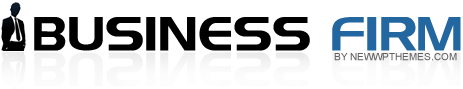
<style>
.page{position:relative;width:463px;height:89px;background:#ffffff}
.page>*{position:absolute;margin:0}
.t1{font:48px "Denmark";color:#000000;text-transform:uppercase}
.t2{font:48px "Denmark";color:#2267a0;text-transform:uppercase}
.t3{font:10px "ArialMT";color:#646161;text-transform:uppercase}
</style>
<div class="page">
<p class="t1" style="left:34px;top:17px;width:427px;height:34px">Business <span class="t2">Firm</span></p>
<p class="t3" style="left:334px;top:53px;width:123px;height:8px">by NewWpThemes.com</p>
</div>
